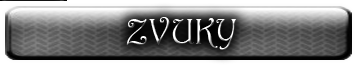
<style>
.page{position:relative;width:360px;height:67px}
.page>*{position:absolute;margin:0}
.t1{font:36px "Harrington"}
</style>
<div class="page">
<p class="t1" style="left:126px;top:17px;width:110px;height:33px">ZVUKY</p>
</div>
